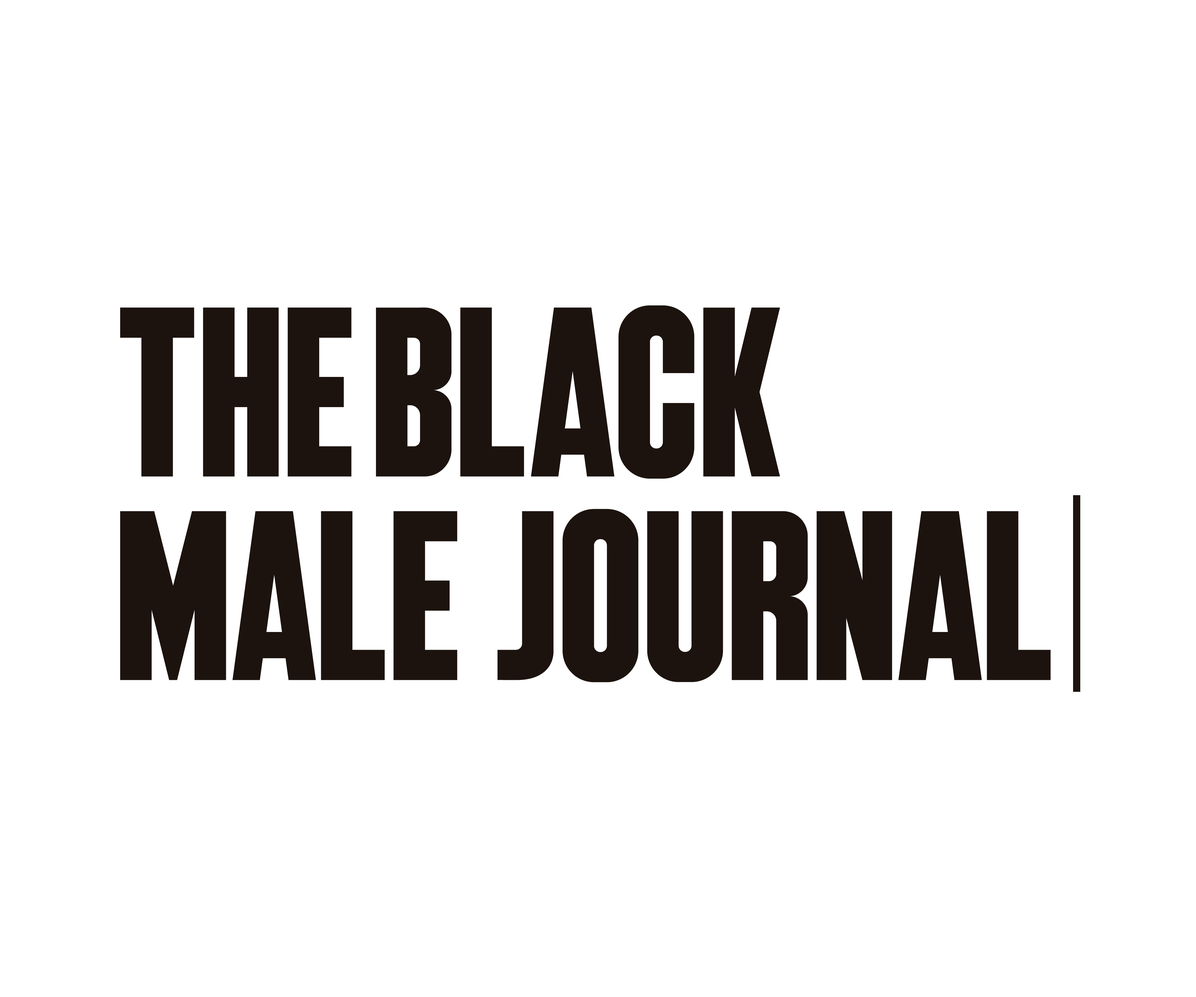
<style>
.page{position:relative;width:1196px;height:997px;background:#ffffff}
.page>*{position:absolute;margin:0}
.t1{font:241.1px "HighriseDemoBold";color:#1c130e}
</style>
<div class="page">
<p class="t1" style="left:120px;top:305px;width:660px;height:174px">the black</p>
<p class="t1" style="left:120px;top:509px;width:931px;height:173px">male  journal</p>
</div>
